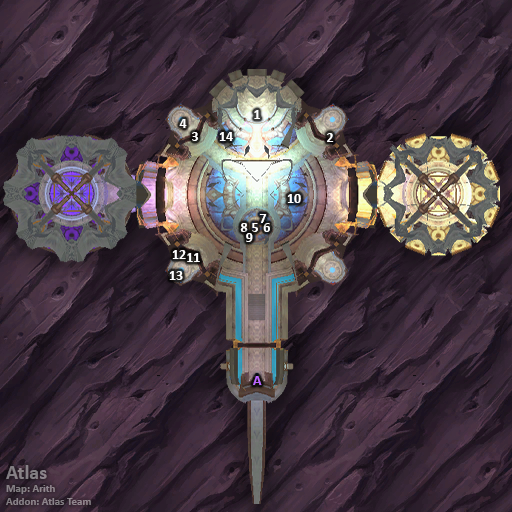
<style>
.page{position:relative;width:512px;height:512px}
.page>*{position:absolute;margin:0}
.t1{font:14px "Calibri-Bold";color:#ffffff}
.t2{font:14px "Calibri-Bold";color:#bb66ff}
.t3{font:11px "Calibri-Bold";color:#888186}
.t4{font:20px "Calibri-Bold";color:#888186}
</style>
<div class="page">
<p class="t1" style="left:254px;top:110px;width:6px;height:9px">1</p>
<p class="t1" style="left:179px;top:119px;width:8px;height:9px">4</p>
<p class="t1" style="left:192px;top:132px;width:6px;height:9px">3</p>
<p class="t1" style="left:219px;top:132px;width:14px;height:9px">14</p>
<p class="t1" style="left:327px;top:133px;width:7px;height:9px">2</p>
<p class="t1" style="left:287px;top:194px;width:14px;height:9px">10</p>
<p class="t1" style="left:259px;top:214px;width:8px;height:9px">7</p>
<p class="t1" style="left:240px;top:223px;width:8px;height:9px">8</p>
<p class="t1" style="left:246px;top:233px;width:7px;height:9px">9</p>
<p class="t1" style="left:252px;top:223px;width:6px;height:9px">5</p>
<p class="t1" style="left:263px;top:223px;width:7px;height:9px">6</p>
<p class="t1" style="left:172px;top:250px;width:14px;height:9px">12</p>
<p class="t1" style="left:187px;top:253px;width:13px;height:9px">11</p>
<p class="t1" style="left:169px;top:271px;width:14px;height:9px">13</p>
<p class="t2" style="left:253px;top:376px;width:9px;height:9px">A</p>
<p class="t3" style="left:6px;top:465px;width:85px;height:40px"><span class="t4">Atlas<br></span>Map: Arith<br>Addon: Atlas Team</p>
</div>
